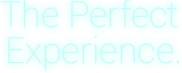
<style>
.page{position:relative;width:182px;height:73px}
.page>*{position:absolute;margin:0}
.t1{font:36px/36px "Roboto-Thin";color:#bffefb}
</style>
<div class="page">
<p class="t1" style="left:0px;top:0px;width:179px;height:71px;text-align:center">The Perfect <br>Experience.</p>
</div>
